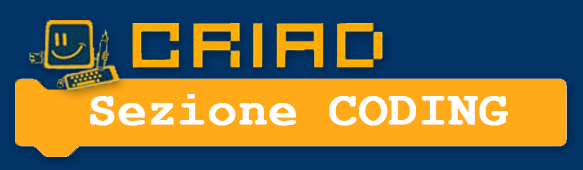
<style>
.page{position:relative;width:583px;height:170px;background:#023467}
.page>*{position:absolute;margin:0}
.t1{font:48px "CourierNewPS-BoldMT";color:#ffffff;font-weight:bold}
</style>
<div class="page">
<p class="t1" style="left:90px;top:94px;width:418px;height:32px">Sezione CODING</p>
</div>
